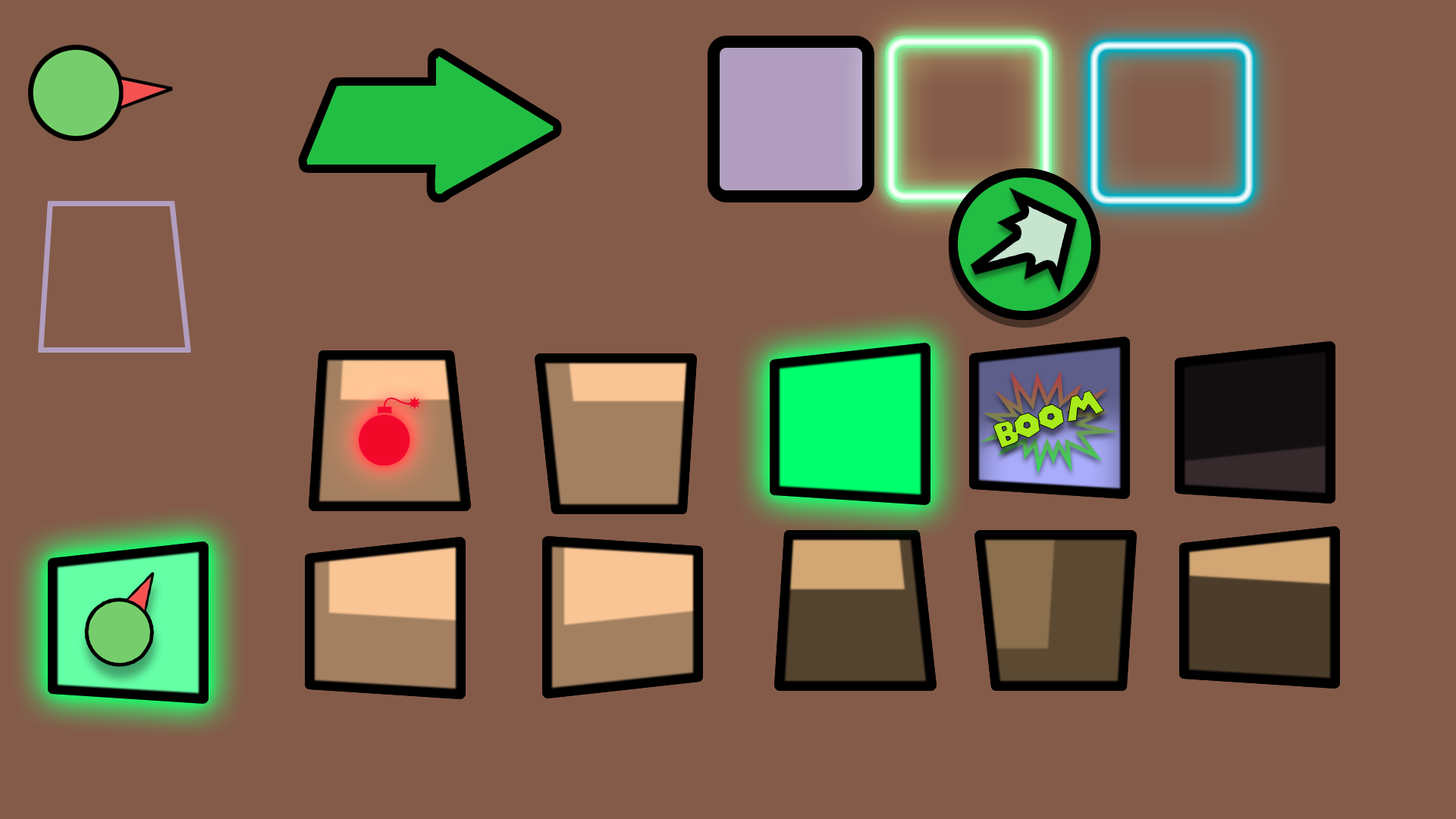
<style>
.page{position:relative;width:1456px;height:819px;background:#845b49}
.page>*{position:absolute;margin:0}
.t1{font:33.5px "SuperMarioGalaxy";color:#a9eb1a}
</style>
<div class="page">
<p class="t1" style="left:993px;top:390px;width:112px;height:58px;rotate:-20deg">Boom</p>
</div>
